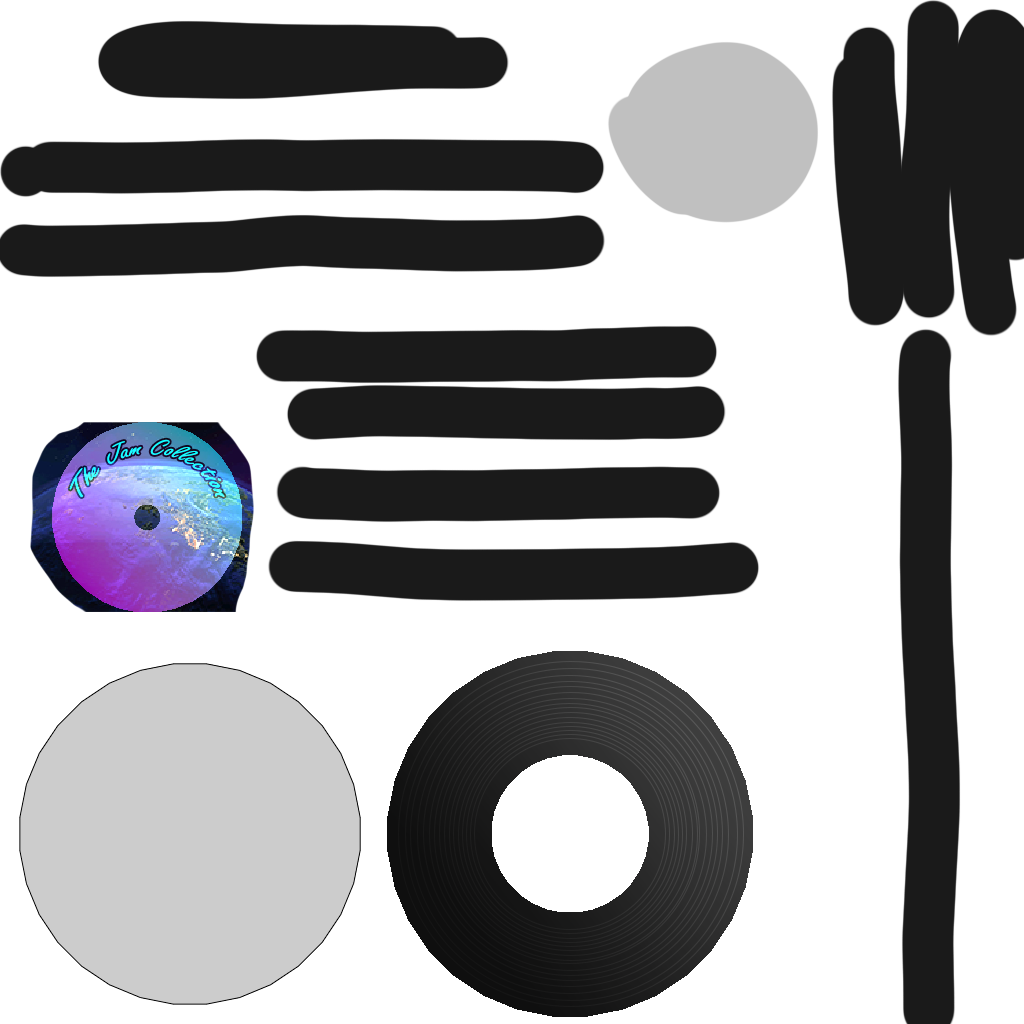
<style>
.page{position:relative;width:1024px;height:1024px;background:#ffffff}
.page>*{position:absolute;margin:0}
.t1{font:24.1px "FreestyleScript-Regular"}
</style>
<div class="page">
<p class="t1" style="left:69px;top:439px;width:156px;height:59px">The Jam Collection</p>
</div>
